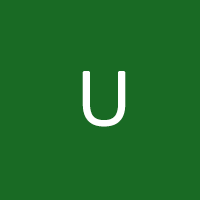
<style>
.page{position:relative;width:200px;height:200px;background:#196a24}
.page>*{position:absolute;margin:0}
.t1{font:72px "Helvetica-Light";color:#ffffff;font-weight:bold}
</style>
<div class="page">
<p class="t1" style="left:82px;top:71px;width:44px;height:56px">U</p>
</div>
